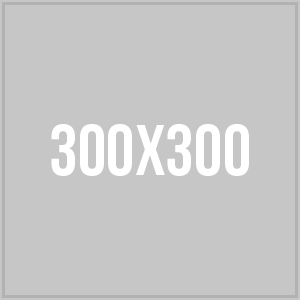
<style>
.page{position:relative;width:300px;height:300px;background:#c6c6c6}
.page>*{position:absolute;margin:0}
.t1{font:72px "BebasNeue";color:#ffffff}
</style>
<div class="page">
<p class="t1" style="left:51px;top:124px;width:198px;height:52px">300x300</p>
</div>
